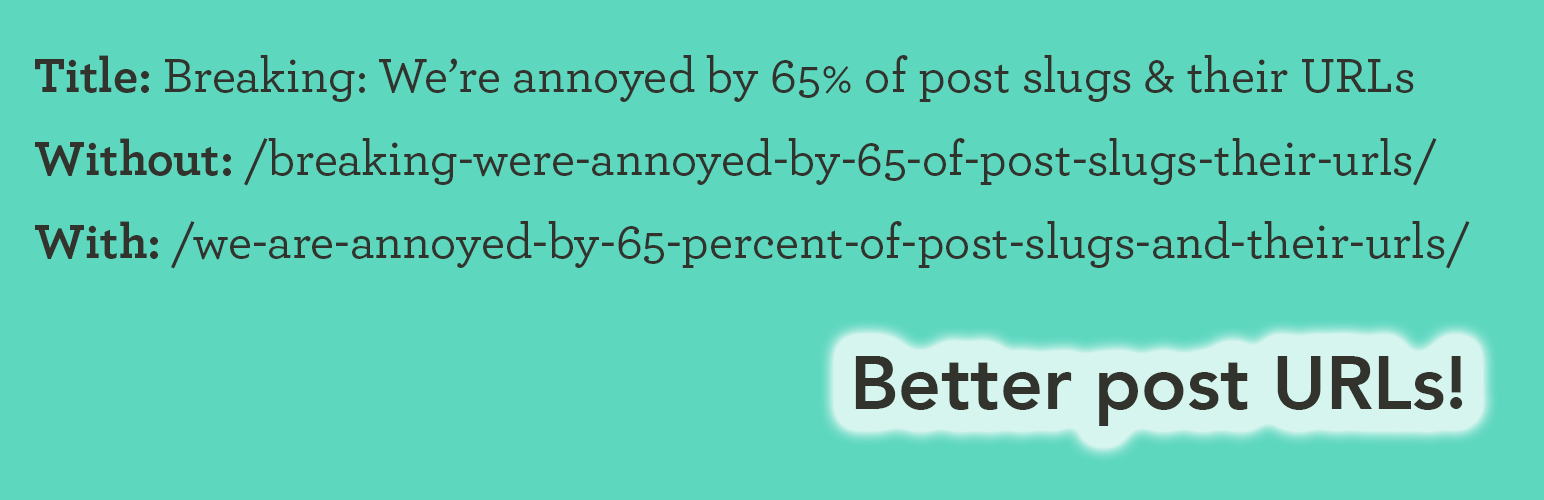
<style>
.page{position:relative;width:1544px;height:500px;background:#5ed7bf}
.page>*{position:absolute;margin:0}
.t1{font:50px/83.3px "Archer-Medium";color:#33332d}
.t2{font:50px/83.3px "Archer-Bold";color:#33332d}
.t3{font:75px "Avenir-Heavy";color:#33332d}
</style>
<div class="page">
<p class="t1" style="left:35px;top:55px;width:1435px;height:214px"><span class="t2">Title:</span> Breaking: We’re annoyed by 65% of post slugs &amp; their URLs<br><span class="t2">Without:</span> /breaking-were-annoyed-by-65-of-post-slugs-their-urls/<br><span class="t2">With:</span> /we-are-annoyed-by-65-percent-of-post-slugs-and-their-urls/</p>
<p class="t3" style="left:855px;top:356px;width:608px;height:70px">Better post URLs!</p>
</div>
